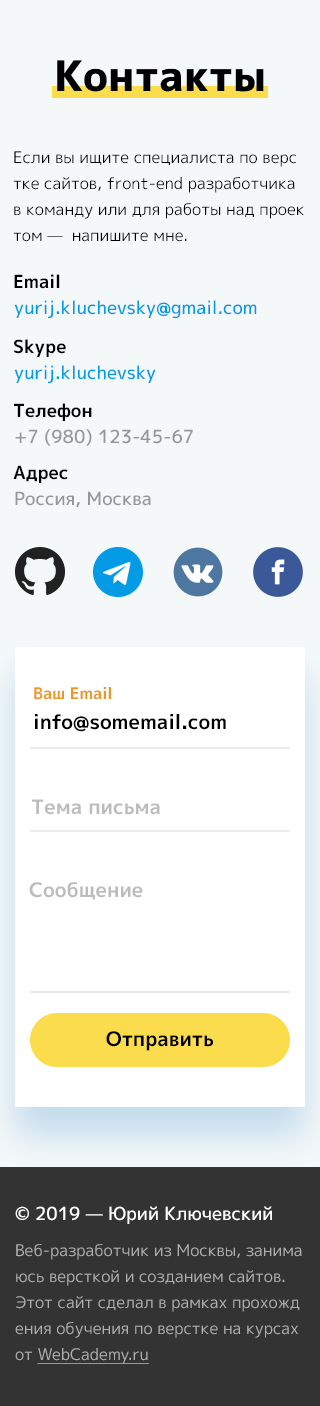
<style>
.page{position:relative;width:320px;height:1406px;background:#f4f8f9}
.page>*{position:absolute;margin:0}
.t1{font:42px "Mplus1p-ExtraBold";color:#000000}
.t2{font:16px/26px "Mplus1p-Regular";color:#000000}
.t3{font:18px "Mplus1p-Bold";color:#000000}
.t4{font:18px "Mplus1p-Medium";color:#039be5}
.t5{font:18px "Mplus1p-Medium";color:#96969d}
.t6{font:16px "Mplus1p-Bold";color:#ed9626}
.t7{font:20px "Mplus1p-Bold";color:#000000}
.t8{font:20px "Mplus1p-Bold";color:#bcbcbc}
.t9{font:16px/26px "Mplus1p-Regular";color:#b0b0b0}
.t10{font:18px "Mplus1p-Medium";color:#ffffff}
.t11{font:16px/26px "Mplus1p-Regular";color:#b0b0b0;text-decoration:underline}
</style>
<div class="page">
<p class="t1" style="left:57px;top:60px;width:207px;height:32px">Контакты</p>
<p class="t2" style="left:13px;top:151px;width:291px;height:91px">Если вы ищите специалиста по верстке сайтов, front-end разработчика в команду или для работы над проектом —  напишите мне.</p>
<p class="t3" style="left:14px;top:274px;width:46px;height:15px">Email</p>
<p class="t4" style="left:14px;top:300px;width:243px;height:19px">yurij.kluchevsky@gmail.com</p>
<p class="t3" style="left:14px;top:339px;width:52px;height:18px">Skype</p>
<p class="t4" style="left:14px;top:365px;width:142px;height:19px">yurij.kluchevsky</p>
<p class="t3" style="left:14px;top:403px;width:78px;height:18px">Телефон</p>
<p class="t5" style="left:15px;top:429px;width:178px;height:17px">+7 (980) 123-45-67</p>
<p class="t3" style="left:13px;top:465px;width:55px;height:18px">Адрес</p>
<p class="t5" style="left:15px;top:491px;width:136px;height:16px">Россия, Москва</p>
<p class="t6" style="left:34px;top:687px;width:77px;height:13px">Ваш Email</p>
<p class="t7" style="left:35px;top:714px;width:191px;height:18px">info@somemail.com</p>
<p class="t8" style="left:32px;top:799px;width:128px;height:16px">Тема письма</p>
<p class="t8" style="left:29px;top:882px;width:114px;height:18px">Сообщение</p>
<p class="t7" style="left:106px;top:1031px;width:107px;height:20px">Отправить</p>
<p class="t9" style="left:15px;top:1206px;width:287px;height:158px"><span class="t10">© 2019 — Юрий Ключевский<br></span>Веб-разработчик из Москвы, занимаюсь версткой и созданием сайтов. <br>Этот сайт сделал в рамках прохождения обучения по верстке на курсах от <span class="t11">WebCademy.ru</span></p>
</div>
